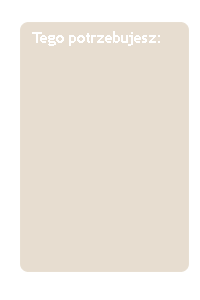
<style>
.page{position:relative;width:200px;height:300px;background:#e7ddd0}
.page>*{position:absolute;margin:0}
.t1{font:16px "TrebuchetMS-Bold";letter-spacing:-0.06em;color:#ffffff}
</style>
<div class="page">
<p class="t1" style="left:32px;top:31px;width:128px;height:15px">Tego potrzebujesz:</p>
</div>
